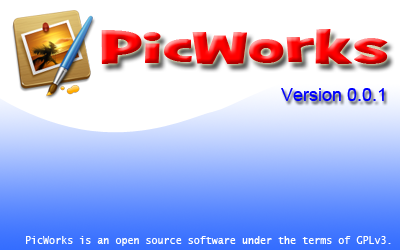
<style>
.page{position:relative;width:400px;height:250px;background:#ffffff}
.page>*{position:absolute;margin:0}
.t1{font:44px "GrilledCheeseBTNWideBlk"}
.t2{font:18px "ArialMT";color:#0000ff}
.t3{font:10px "LucidaSans-Typewriter";color:#ffffff}
</style>
<div class="page">
<p class="t1" style="left:101px;top:29px;width:287px;height:35px">PicWorks</p>
<p class="t2" style="left:281px;top:88px;width:103px;height:13px">Version 0.0.1</p>
<p class="t3" style="left:26px;top:236px;width:365px;height:10px">PicWorks is an open source software under the terms of GPLv3.</p>
</div>
